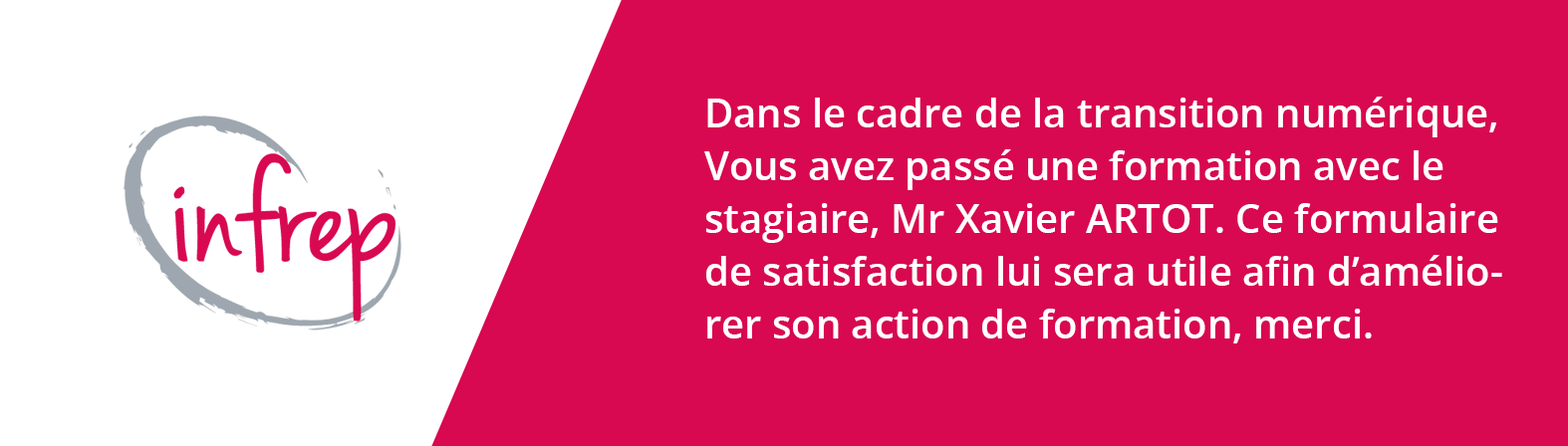
<style>
.page{position:relative;width:1568px;height:446px;background:#d80851}
.page>*{position:absolute;margin:0}
.t1{font:39.8px/52.8px "OpenSans-Semibold";color:#ffffff}
</style>
<div class="page">
<p class="t1" style="left:704px;top:97px;width:798px;height:247px">Dans le cadre de la transition numérique,<br>Vous avez passé une formation avec le <br>stagiaire, Mr Xavier ARTOT. Ce formulaire <br>de satisfaction lui sera utile afin d’amélio-<br>rer son action de formation, merci.</p>
</div>
